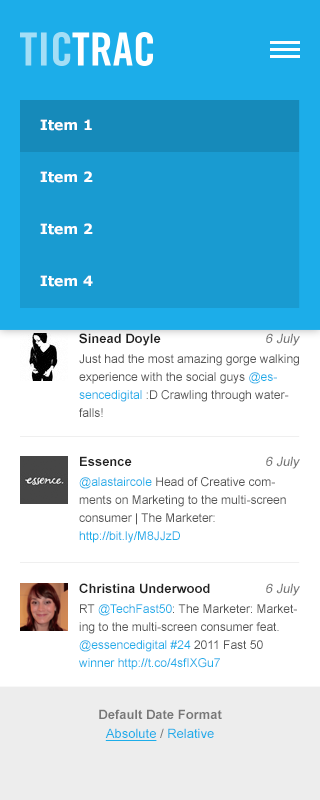
<style>
.page{position:relative;width:320px;height:800px;background:#ffffff}
.page>*{position:absolute;margin:0}
.t1{font:14px "Verdana-Bold";color:#ffffff}
.t2{font:12px/18px "ArialMT";color:#555555}
.t3{font:12px/18px "ArialMT";color:#1cade9}
.t4{font:13px "Arial-BoldMT";color:#222222}
.t5{font:13px "ArialMT";color:#777777;font-style:italic}
.t6{font:13px "Arial-BoldMT";color:#777777}
.t7{font:13px "ArialMT";color:#1cade9;text-decoration:underline}
.t8{font:13px "ArialMT";color:#777777}
.t9{font:13px "ArialMT";color:#1cade9}
</style>
<div class="page">
<p class="t1" style="left:40px;top:119px;width:52px;height:12px">Item 1</p>
<p class="t2" style="left:79px;top:141px;width:206px;height:66px"><span class="t3">@smcdoyle @essencedigital </span>so green with envy right now!! The office was extremely quiet without the social team there. :(</p>
<p class="t1" style="left:40px;top:171px;width:53px;height:12px">Item 2</p>
<p class="t1" style="left:40px;top:223px;width:53px;height:12px">Item 2</p>
<p class="t1" style="left:40px;top:275px;width:53px;height:12px">Item 4</p>
<p class="t4" style="left:79px;top:333px;width:82px;height:13px">Sinead Doyle</p>
<p class="t5" style="left:266px;top:333px;width:34px;height:13px">6 July</p>
<p class="t2" style="left:79px;top:354px;width:220px;height:63px">Just had the most amazing gorge walking experience with the social guys <span class="t3">@essencedigital</span> :D Crawling through waterfalls!</p>
<p class="t4" style="left:80px;top:456px;width:52px;height:10px">Essence</p>
<p class="t5" style="left:266px;top:456px;width:34px;height:13px">6 July</p>
<p class="t2" style="left:79px;top:477px;width:207px;height:66px"><span class="t3">@alastaircole </span>Head of Creative comments on Marketing to the multi-screen consumer | The Marketer: <span class="t3">http://bit.ly/M8JJzD</span></p>
<p class="t4" style="left:79px;top:583px;width:131px;height:11px">Christina Underwood</p>
<p class="t5" style="left:266px;top:583px;width:34px;height:13px">6 July</p>
<p class="t2" style="left:79px;top:604px;width:218px;height:66px">RT <span class="t3">@TechFast50</span>: The Marketer: Marketing to the multi-screen consumer feat. <span class="t3">@essencedigital #24</span> 2011 Fast 50 <span class="t3">winner http://t.co/4sfIXGu7</span></p>
<p class="t6" style="left:99px;top:709px;width:123px;height:10px">Default Date Format</p>
<p class="t7" style="left:105px;top:728px;width:109px;height:13px">Absolute <span class="t8">/ </span><span class="t9">Relative</span></p>
</div>
